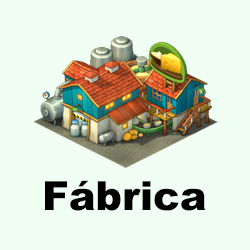
<style>
.page{position:relative;width:250px;height:250px;background:#f1fef3}
.page>*{position:absolute;margin:0}
.t1{font:40px "Arial-Black";color:#000000}
</style>
<div class="page">
<p class="t1" style="left:45px;top:180px;width:161px;height:31px">Fábrica</p>
</div>
